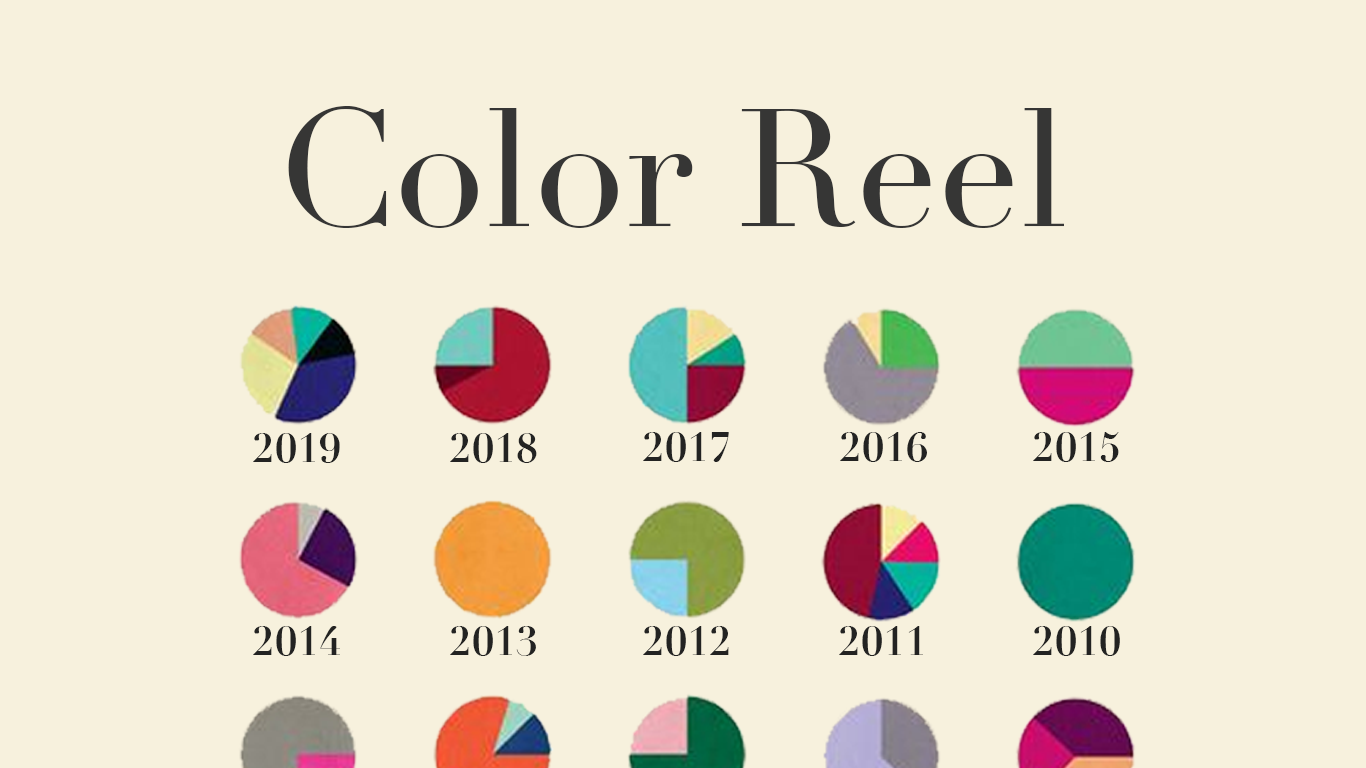
<style>
.page{position:relative;width:1366px;height:768px;background:#f7f1dd}
.page>*{position:absolute;margin:0}
.t1{font:164px "Didot";color:#363635}
.t2{font:40px "Didot-Bold";color:#232322}
</style>
<div class="page">
<p class="t1" style="left:288px;top:106px;width:776px;height:122px">Color Reel</p>
<p class="t2" style="left:253px;top:433px;width:87px;height:30px">2019</p>
<p class="t2" style="left:450px;top:433px;width:87px;height:30px">2018</p>
<p class="t2" style="left:643px;top:432px;width:86px;height:30px">2017</p>
<p class="t2" style="left:840px;top:432px;width:87px;height:30px">2016</p>
<p class="t2" style="left:1033px;top:432px;width:86px;height:30px">2015</p>
<p class="t2" style="left:253px;top:626px;width:87px;height:30px">2014</p>
<p class="t2" style="left:450px;top:626px;width:86px;height:30px">2013</p>
<p class="t2" style="left:643px;top:626px;width:86px;height:30px">2012</p>
<p class="t2" style="left:839px;top:626px;width:84px;height:30px">2011</p>
<p class="t2" style="left:1033px;top:626px;width:87px;height:30px">2010</p>
</div>
